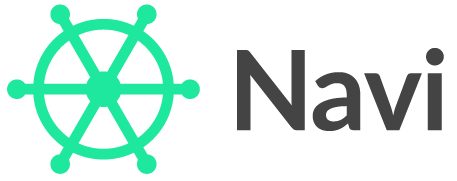
<style>
.page{position:relative;width:457px;height:181px;background:#ffffff}
.page>*{position:absolute;margin:0}
.t1{font:110.6px "Lato-Bold";letter-spacing:-0.025em;color:#444444}
.t2{font:110.6px "Lato-Bold";letter-spacing:-0.04em;color:#444444}
</style>
<div class="page">
<p class="t1" style="left:237px;top:48px;width:207px;height:83px"><span class="t2">N</span>avi</p>
</div>
